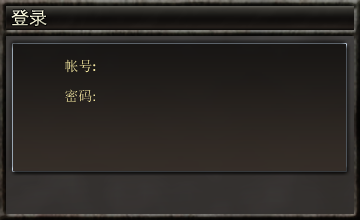
<style>
.page{position:relative;width:360px;height:220px}
.page>*{position:absolute;margin:0}
.t1{font:18px "STXihei";color:#fefcdd}
.t2{font:14px "SimSun";color:#fcefa5}
.t3{font:14px "Candara";color:#fcefa5}
.t4{font:14px "Calibri";color:#fcefa5}
</style>
<div class="page">
<p class="t1" style="left:11px;top:9px;width:36px;height:17px">登录</p>
<p class="t2" style="left:65px;top:59px;width:31px;height:14px">帐号<span class="t3">:</span></p>
<p class="t2" style="left:65px;top:89px;width:30px;height:13px">密码<span class="t4">:</span></p>
</div>
